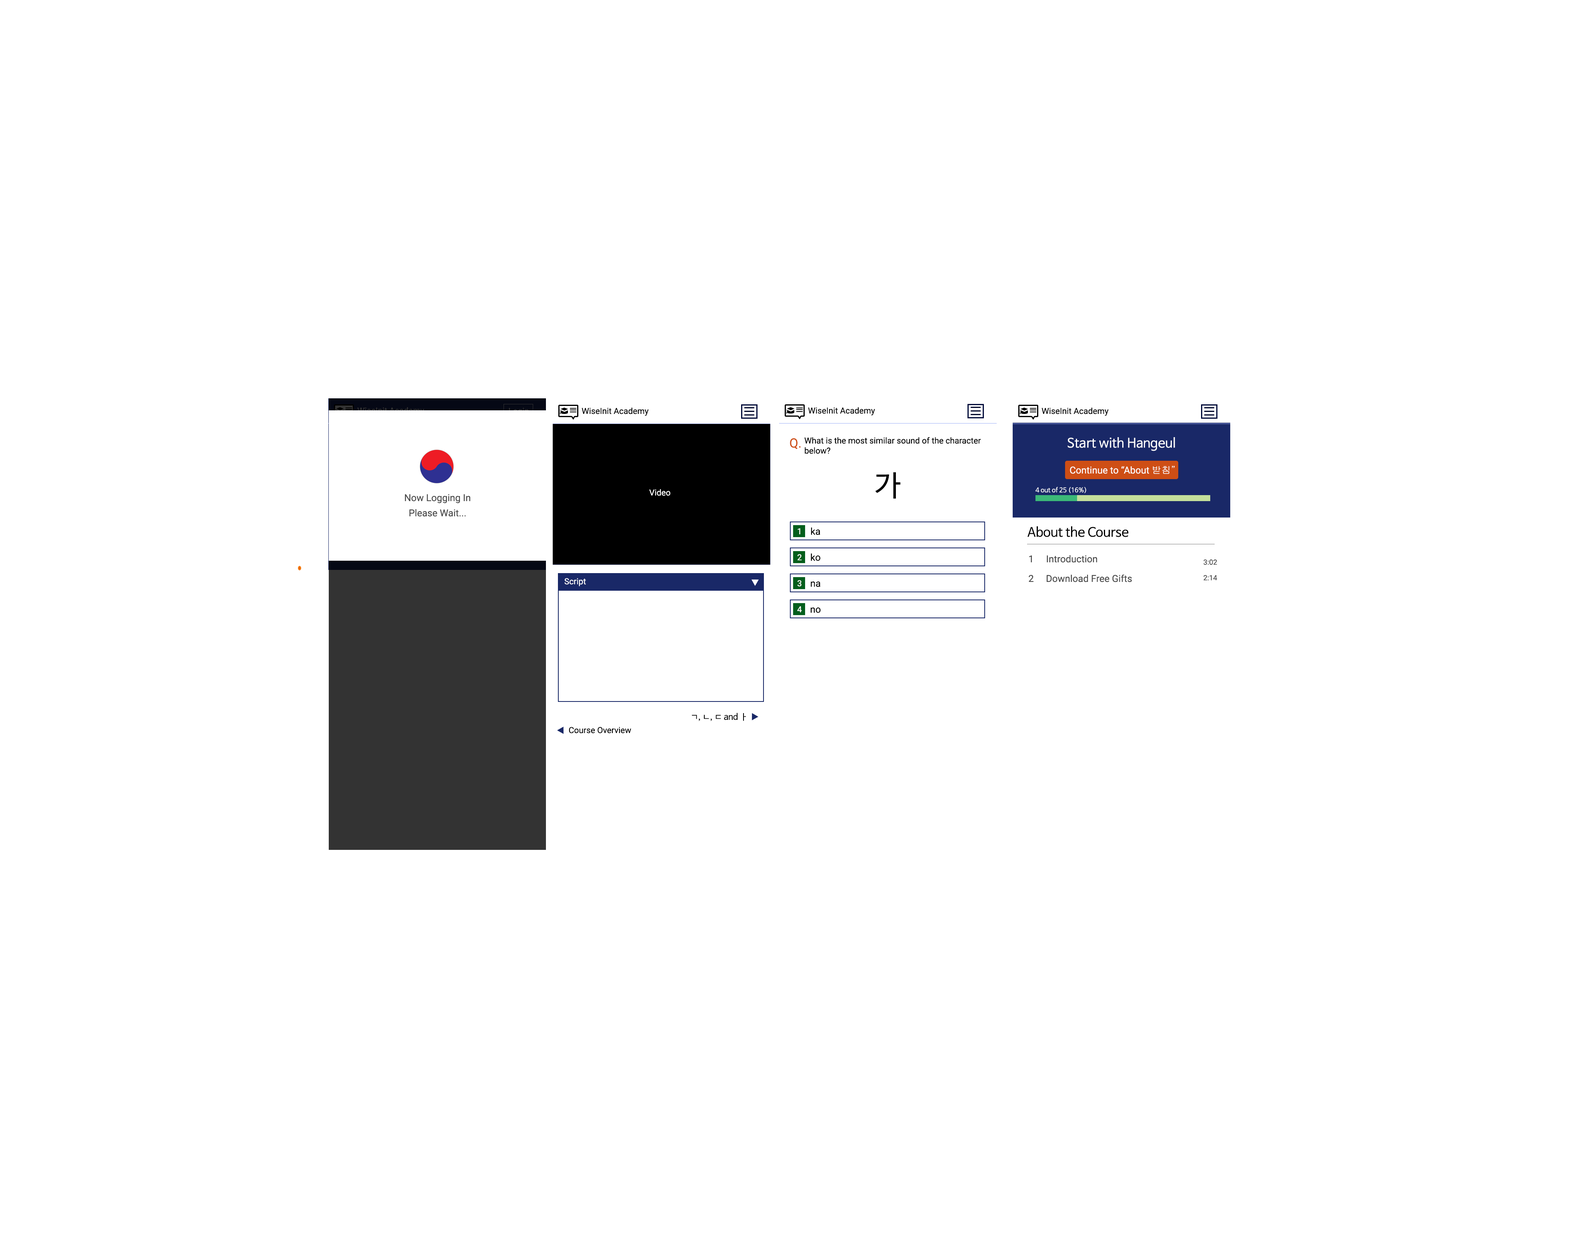
<style>
.page{position:relative;width:1587px;height:1251px;background:#ffffff}
.page>*{position:absolute;margin:0}
.t1{font:8.4px "Roboto-Regular";color:#000000}
.t2{font:12.8px "Roboto-Regular";color:#ce4e15}
.t3{font:12.8px "NanumBarunGothic";color:#ffffff}
.t4{font:28.8px "NanumBarunGothic";color:#000000}
.t5{font:9.6px "Roboto-Regular";color:#fefefe}
.t6{font:9.6px "Gulim";color:#fefefe}
.t7{font:9.6px "Roboto-Regular";color:#484848}
.t8{font:8.4px "Roboto-Regular";color:#ffffff}
.t9{font:6.4px "NanumBarunGothic";color:#ffffff}
.t10{font:9.6px "Roboto-Regular";color:#000000}
.t11{font:12.8px "NanumBarunGothic";color:#000000}
.t12{font:7.2px "Roboto-Regular";color:#484848}
.t13{font:8.4px "NanumBarunGothic";color:#000000}
</style>
<div class="page">
<p class="t1" style="left:582px;top:408px;width:67px;height:8px">WiseInit Academy</p>
<p class="t1" style="left:808px;top:407px;width:67px;height:9px">WiseInit Academy</p>
<p class="t1" style="left:1042px;top:408px;width:67px;height:8px">WiseInit Academy</p>
<p class="t2" style="left:790px;top:438px;width:11px;height:11px">Q.</p>
<p class="t1" style="left:804px;top:437px;width:177px;height:17px">What is the most similar sound of the character<br>below?</p>
<p class="t3" style="left:1068px;top:437px;width:107px;height:14px">Start with Hangeul</p>
<p class="t4" style="left:875px;top:472px;width:26px;height:27px">가</p>
<p class="t5" style="left:1070px;top:466px;width:105px;height:8px">Continue to “About <span class="t6">받침”</span></p>
<p class="t7" style="left:405px;top:494px;width:65px;height:9px">Now Logging In</p>
<p class="t8" style="left:649px;top:489px;width:21px;height:7px">Video</p>
<p class="t9" style="left:1036px;top:487px;width:50px;height:6px">4 out of 25 (16%)</p>
<p class="t7" style="left:409px;top:509px;width:57px;height:8px">Please Wait...</p>
<p class="t8" style="left:798px;top:528px;width:2px;height:6px">1</p>
<p class="t10" style="left:811px;top:528px;width:9px;height:7px">ka</p>
<p class="t11" style="left:1028px;top:526px;width:101px;height:11px">About the Course</p>
<p class="t8" style="left:798px;top:554px;width:4px;height:6px">2</p>
<p class="t10" style="left:811px;top:554px;width:9px;height:7px">ko</p>
<p class="t7" style="left:1029px;top:555px;width:3px;height:7px">1</p>
<p class="t7" style="left:1047px;top:555px;width:50px;height:8px">Introduction</p>
<p class="t12" style="left:1204px;top:560px;width:13px;height:5px">3:02</p>
<p class="t8" style="left:564px;top:578px;width:22px;height:8px">Script</p>
<p class="t8" style="left:798px;top:580px;width:4px;height:7px">3</p>
<p class="t10" style="left:811px;top:582px;width:9px;height:5px">na</p>
<p class="t7" style="left:1029px;top:575px;width:5px;height:7px">2</p>
<p class="t7" style="left:1047px;top:574px;width:85px;height:8px">Download Free Gifts</p>
<p class="t12" style="left:1204px;top:575px;width:13px;height:6px">2:14</p>
<p class="t8" style="left:797px;top:606px;width:5px;height:6px">4</p>
<p class="t10" style="left:811px;top:608px;width:10px;height:5px">no</p>
<p class="t13" style="left:692px;top:713px;width:54px;height:8px">ㄱ, ㄴ, ㄷ and ㅏ</p>
<p class="t1" style="left:569px;top:727px;width:62px;height:7px">Course Overview</p>
</div>
